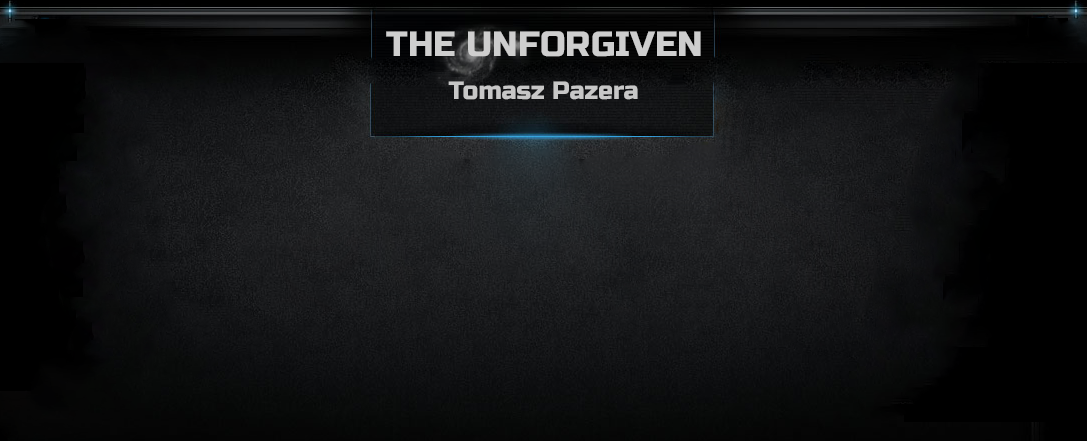
<style>
.page{position:relative;width:1087px;height:441px}
.page>*{position:absolute;margin:0}
.t1{font:35px "RussoOne-Regular";color:#cecece}
.t2{font:25px "RussoOne-Regular";color:#c7c7c7}
</style>
<div class="page">
<p class="t1" style="left:386px;top:31px;width:315px;height:26px">THE UNFORGIVEN</p>
<p class="t2" style="left:448px;top:81px;width:190px;height:19px">Tomasz Pazera</p>
</div>
